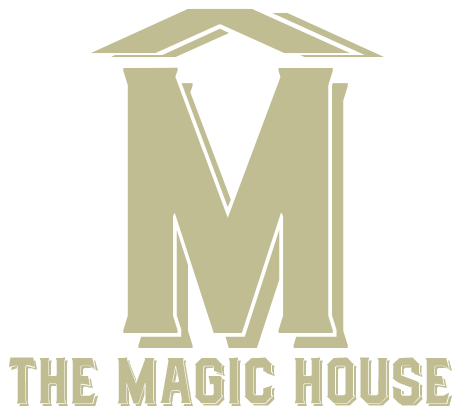
<style>
.page{position:relative;width:462px;height:418px;background:#ffffff}
.page>*{position:absolute;margin:0}
.t1{font:200px "DealersShaded";color:#c0bd92;scale:5.03 1}
.t2{font:379px "DealersShaded";color:#c0bd92}
.t3{font:65px "DealersShaded";color:#c0bd92}
</style>
<div class="page">
<p class="t1" style="left:91px;top:8px;width:293px;height:49px">^</p>
<p class="t2" style="left:123px;top:67px;width:225px;height:281px">M</p>
<p class="t3" style="left:9px;top:357px;width:443px;height:49px">the magic house</p>
</div>
